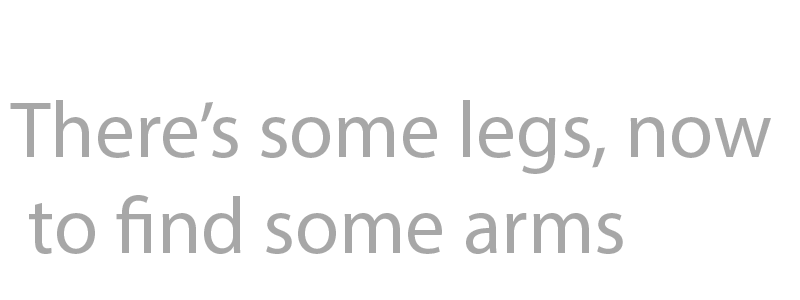
<style>
.page{position:relative;width:800px;height:300px;background:#ffffff}
.page>*{position:absolute;margin:0}
.t1{font:80px "MyriadPro-Regular";color:#a7a7a7}
</style>
<div class="page">
<p class="t1" style="left:10px;top:100px;width:761px;height:154px">There’s some legs, now<br> to find some arms</p>
</div>
